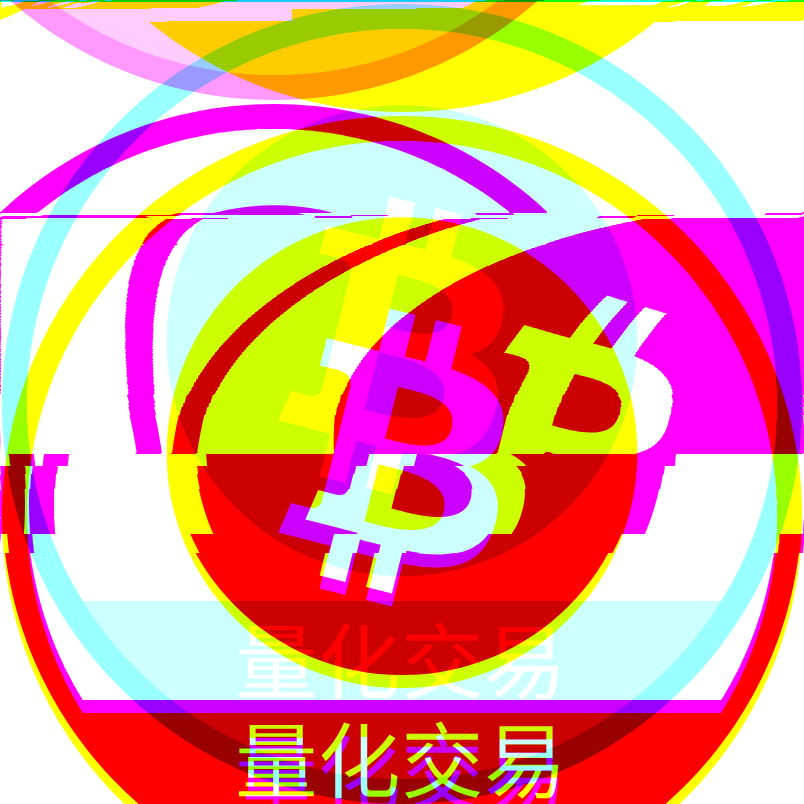
<style>
.page{position:relative;width:804px;height:804px;background:#ffffff}
.page>*{position:absolute;margin:0}
.t1{font:83.1px "MicrosoftYaHei"}
</style>
<div class="page">
<p class="t1" style="left:238px;top:620px;width:321px;height:78px">量化交易</p>
</div>
